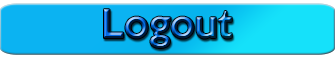
<style>
.page{position:relative;width:335px;height:58px;background:#0bb3f2}
.page>*{position:absolute;margin:0}
.t1{font:36px "KeepCalm-Medium"}
</style>
<div class="page">
<p class="t1" style="left:104px;top:9px;width:128px;height:39px">Logout</p>
</div>
